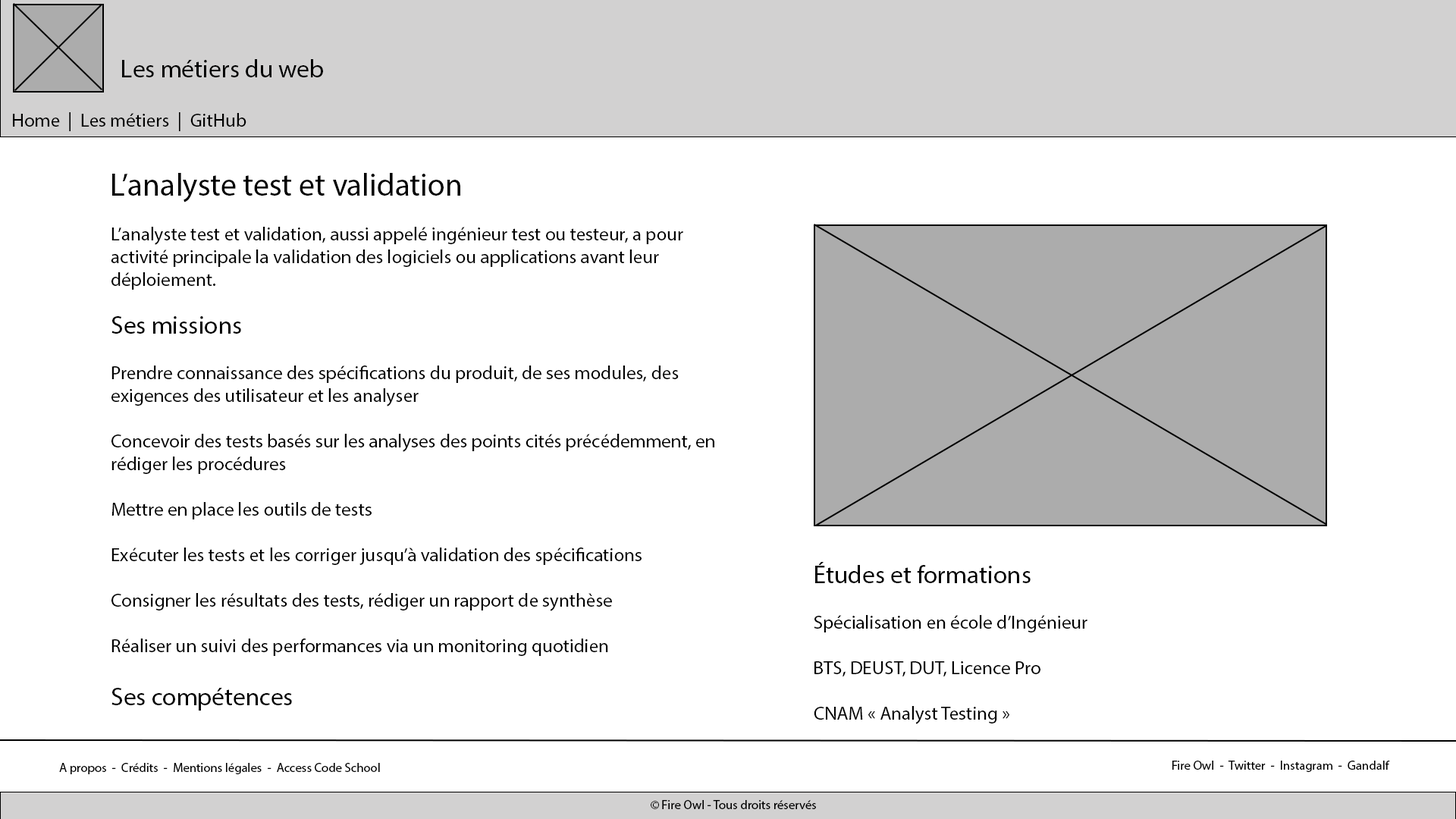
<style>
.page{position:relative;width:1456px;height:819px;background:#ffffff}
.page>*{position:absolute;margin:0}
.t1{font:25.3px "MyriadPro-Regular";color:#000000}
.t2{font:19px "MyriadPro-Regular";color:#000000}
.t3{font:31.6px "MyriadPro-Regular";color:#000000}
.t4{font:12.6px "MyriadPro-Regular";color:#000000}
</style>
<div class="page">
<p class="t1" style="left:122px;top:59px;width:201px;height:18px">Les métiers du web</p>
<p class="t2" style="left:13px;top:112px;width:233px;height:19px">Home  |  Les métiers  |  GitHub</p>
<p class="t3" style="left:112px;top:173px;width:348px;height:29px">L’analyste test et validation</p>
<p class="t2" style="left:111px;top:227px;width:572px;height:63px">L’analyste test et validation, aussi appelé ingénieur test ou testeur, a pour activité principale la validation des logiciels ou applications avant leur déploiement.</p>
<p class="t2" style="left:111px;top:316px;width:603px;height:395px"><span class="t1">Ses missions<br></span><br>Prendre connaissance des spécifications du produit, de ses modules, des   exigences des utilisateur et les analyser<br><br>Concevoir des tests basés sur les analyses des points cités précédemment, en rédiger les procédures<br><br>Mettre en place les outils de tests<br><br>Exécuter les tests et les corriger jusqu’à validation des spécifications<br><br>Consigner les résultats des tests, rédiger un rapport de synthèse<br><br>Réaliser un suivi des performances via un monitoring quotidien<br><br><span class="t1">Ses compétences<br><br><br><br><br>Salaire</span></p>
<p class="t4" style="left:1172px;top:761px;width:218px;height:11px">Fire Owl  -  Twitter  -  Instagram  -  Gandalf</p>
<p class="t4" style="left:59px;top:763px;width:321px;height:11px">A propos  -  Crédits  -  Mentions légales  -  Access Code School</p>
<p class="t4" style="left:651px;top:800px;width:165px;height:9px">© Fire Owl - Tous droits réservés</p>
</div>
